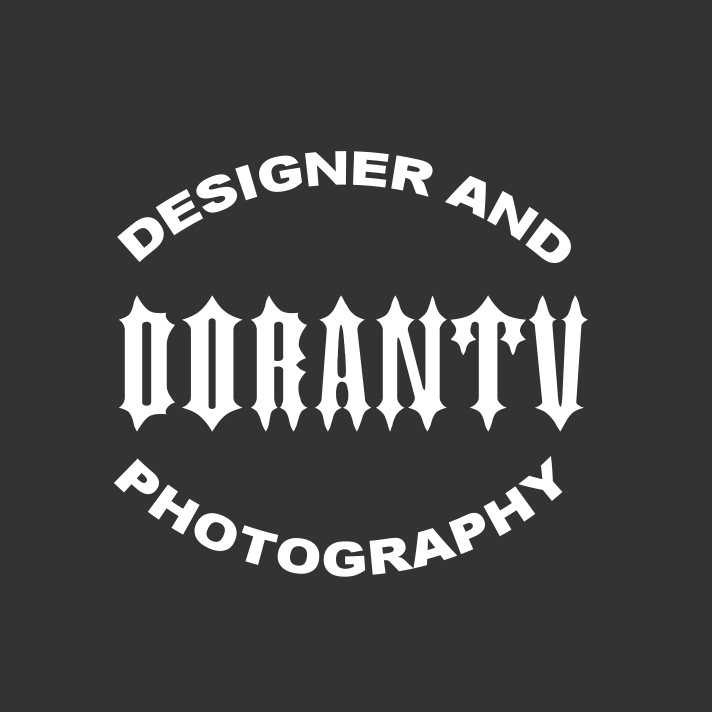
<style>
.page{position:relative;width:712px;height:712px;background:#333333}
.page>*{position:absolute;margin:0}
.t1{font:46.7px "Arial-Black";color:#ffffff}
.t2{font:149px "JudasCapsWd";color:#ffffff}
.t3{font:47px "Arial-Black";color:#ffffff}
</style>
<div class="page">
<p class="t1" style="left:117px;top:151px;width:454px;height:112px;rotate:3deg">DESIGNER AND</p>
<p class="t2" style="left:118px;top:295px;width:470px;height:137px">Dorantv</p>
<p class="t3" style="left:113px;top:455px;width:450px;height:122px">PHOTOGRAPHY</p>
</div>
